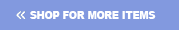
<style>
.page{position:relative;width:179px;height:30px;background:#8299df}
.page>*{position:absolute;margin:0}
.t1{font:18.2px "Arial-Black";color:#ffffff;scale:0.9 1}
</style>
<div class="page">
<p class="t1" style="left:30px;top:11px;width:126px;height:8px">SHOP FOR MORE ITEMS</p>
</div>
